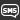
<style>
.page{position:relative;width:20px;height:20px;background:#333333}
.page>*{position:absolute;margin:0}
.t1{font:7.6px "DINBlackAlternate";color:#ffffff;text-transform:uppercase;scale:0.93 1}
</style>
<div class="page">
<p class="t1" style="left:2px;top:8px;width:15px;height:5px">sms</p>
</div>
